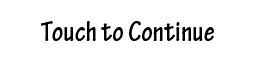
<style>
.page{position:relative;width:256px;height:64px;background:#ffffff}
.page>*{position:absolute;margin:0}
.t1{font:30px "TektonPro-BoldCond";color:#000000}
</style>
<div class="page">
<p class="t1" style="left:41px;top:21px;width:173px;height:20px">Touch to Continue</p>
</div>
